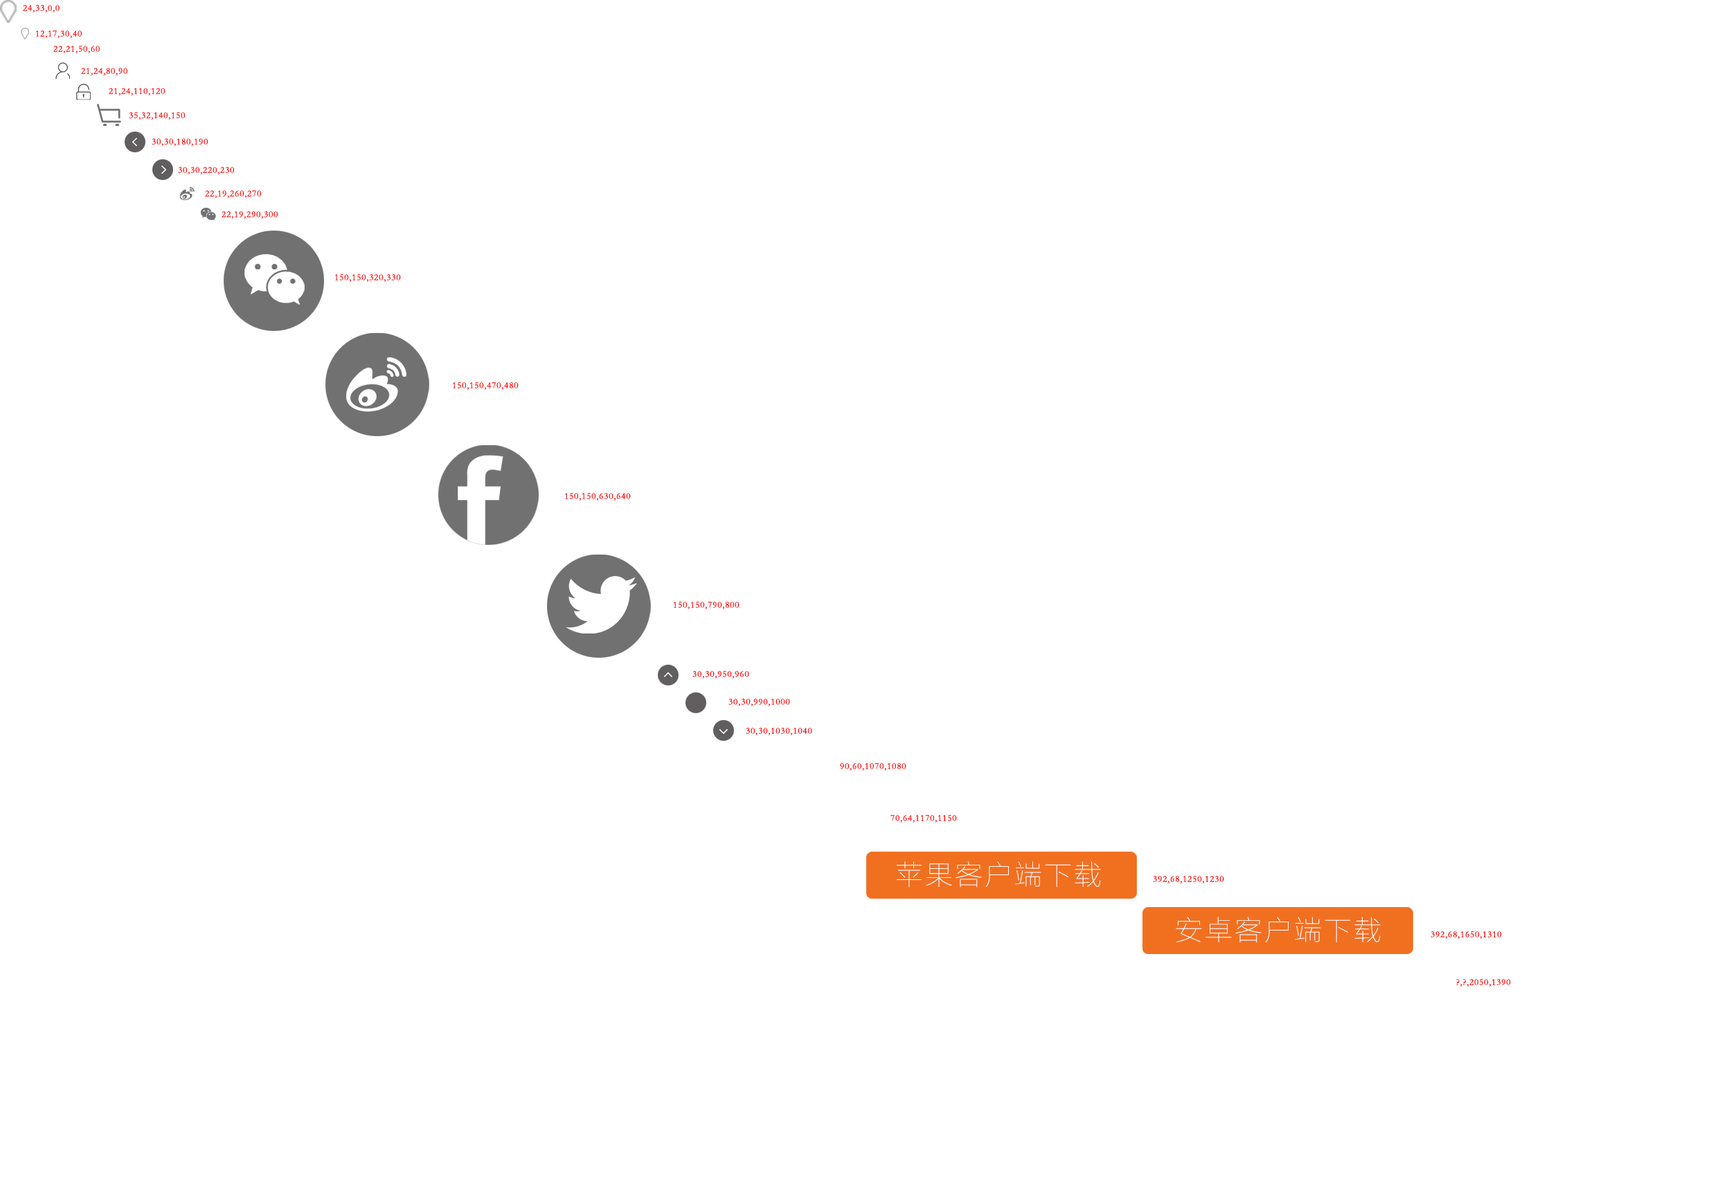
<style>
.page{position:relative;width:1731px;height:1177px;background:#ffffff}
.page>*{position:absolute;margin:0}
.t1{font:9px "STFangsong";letter-spacing:0.075em;color:#ff0000}
.t2{font:27.7px "FZLTCXHJW--GB1-0";letter-spacing:0.075em;color:#ffffff}
</style>
<div class="page">
<p class="t1" style="left:23px;top:5px;width:37px;height:7px">24,33,0,0</p>
<p class="t1" style="left:36px;top:30px;width:46px;height:8px">12,17,30,40</p>
<p class="t1" style="left:53px;top:46px;width:47px;height:7px">22,21,50,60</p>
<p class="t1" style="left:81px;top:68px;width:46px;height:7px">21,24,80,90</p>
<p class="t1" style="left:109px;top:88px;width:56px;height:8px">21,24,110,120</p>
<p class="t1" style="left:129px;top:112px;width:56px;height:8px">35,32,140,150</p>
<p class="t1" style="left:152px;top:138px;width:56px;height:8px">30,30,180,190</p>
<p class="t1" style="left:178px;top:167px;width:56px;height:7px">30,30,220,230</p>
<p class="t1" style="left:205px;top:190px;width:56px;height:8px">22,19,260,270</p>
<p class="t1" style="left:222px;top:211px;width:56px;height:8px">22,19,290,300</p>
<p class="t1" style="left:335px;top:274px;width:66px;height:8px">150,150,320,330</p>
<p class="t1" style="left:453px;top:382px;width:66px;height:8px">150,150,470,480</p>
<p class="t1" style="left:565px;top:493px;width:66px;height:8px">150,150,630,640</p>
<p class="t1" style="left:674px;top:602px;width:65px;height:7px">150,150,790,800</p>
<p class="t1" style="left:692px;top:671px;width:57px;height:7px">30,30,950,960</p>
<p class="t1" style="left:728px;top:699px;width:62px;height:7px">30,30,990,1000</p>
<p class="t1" style="left:746px;top:728px;width:66px;height:7px">30,30,1030,1040</p>
<p class="t1" style="left:840px;top:763px;width:66px;height:8px">90,60,1070,1080</p>
<p class="t1" style="left:890px;top:815px;width:67px;height:7px">70,64,1170,1150</p>
<p class="t2" style="left:897px;top:861px;width:204px;height:27px">苹果客户端下载</p>
<p class="t1" style="left:1153px;top:876px;width:71px;height:7px">392,68,1250,1230</p>
<p class="t2" style="left:1176px;top:917px;width:204px;height:26px">安卓客户端下载</p>
<p class="t1" style="left:1430px;top:931px;width:72px;height:8px">392,68,1650,1310</p>
<p class="t1" style="left:1456px;top:979px;width:55px;height:8px">?,?,2050,1390</p>
</div>
